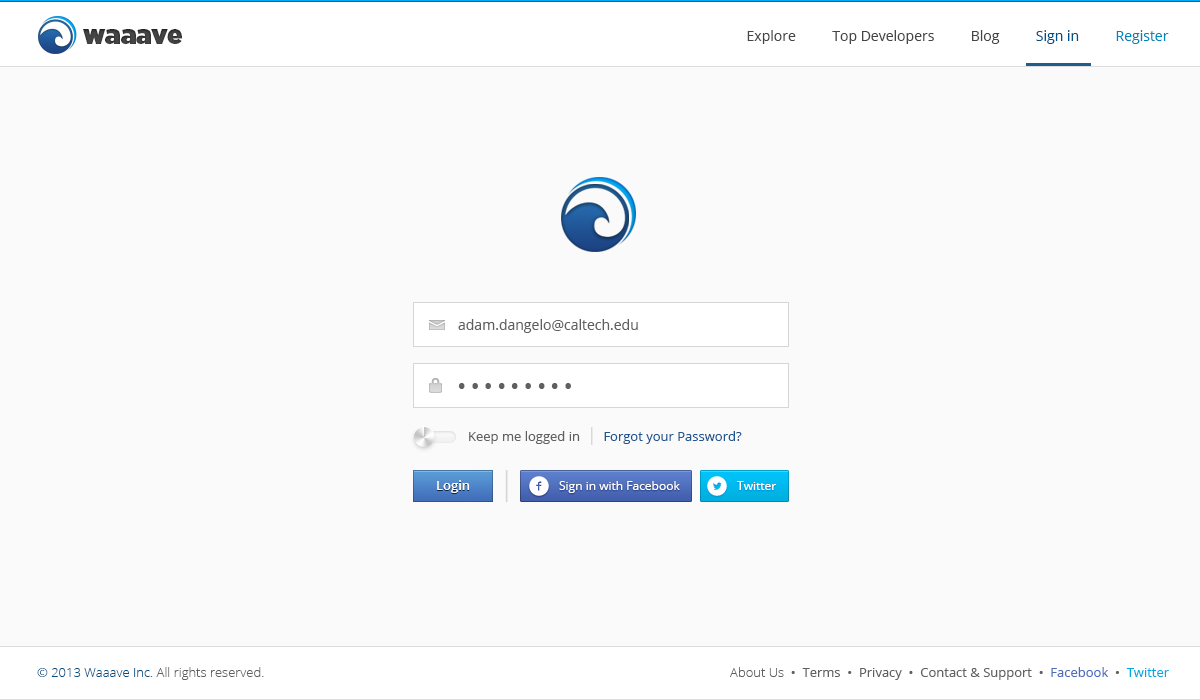
<style>
.page{position:relative;width:1200px;height:700px;background:#fafafa}
.page>*{position:absolute;margin:0}
.t1{font:25.9px "Gotham-Ultra";color:#454545}
.t2{font:14px "OpenSans";color:#454545}
.t3{font:14px "OpenSans";color:#005086}
.t4{font:14px "OpenSans";color:#0086b8}
.t5{font:14px "OpenSans";color:#606060}
.t6{font:25px "OpenSans";color:#606060}
.t7{font:13px "OpenSans";color:#1f5691}
.t8{font:13px "OpenSans";color:#606060}
.t9{font:18px "OpenSans";color:#d6d6d6}
.t10{font:32px "OpenSans-Light";color:#d6d6d6}
.t11{font:13px "OpenSans-Semibold";color:#ffffff}
.t12{font:12px "OpenSans";color:#ffffff}
.t13{font:13px "OpenSans-Light";color:#606060}
.t14{font:13px "OpenSans-Light";color:#005086}
.t15{font:13px "OpenSans";color:#4e6dbb}
.t16{font:13px "OpenSans";color:#01abe1}
</style>
<div class="page">
<p class="t1" style="left:83px;top:29px;width:99px;height:15px">waaave</p>
<p class="t2" style="left:747px;top:30px;width:422px;height:14px">Explore          Top Developers          Blog          <span class="t3">Sign in          </span><span class="t4">Register</span></p>
<p class="t5" style="left:458px;top:319px;width:180px;height:14px">adam.dangelo@caltech.edu</p>
<p class="t6" style="left:458px;top:383px;width:113px;height:6px">• • • • • • • • •</p>
<p class="t7" style="left:469px;top:427px;width:273px;height:18px"><span class="t8">Keep me logged in  </span><span class="t9">|  </span>Forgot your Password?</p>
<p class="t10" style="left:505px;top:470px;width:3px;height:32px">|</p>
<p class="t11" style="left:437px;top:480px;width:33px;height:13px">Login</p>
<p class="t12" style="left:559px;top:481px;width:121px;height:12px">Sign in with Facebook</p>
<p class="t12" style="left:737px;top:481px;width:40px;height:9px">Twitter</p>
<p class="t13" style="left:37px;top:667px;width:227px;height:13px"><span class="t14">© 2013 Waaave Inc</span>. All rights reserved.</p>
<p class="t8" style="left:730px;top:667px;width:439px;height:13px"><span class="t13">About Us  </span>•  Terms  •  Privacy  •  Contact &amp; Support  •  <span class="t15">Facebook</span>  •  <span class="t16">Twitter</span></p>
</div>
